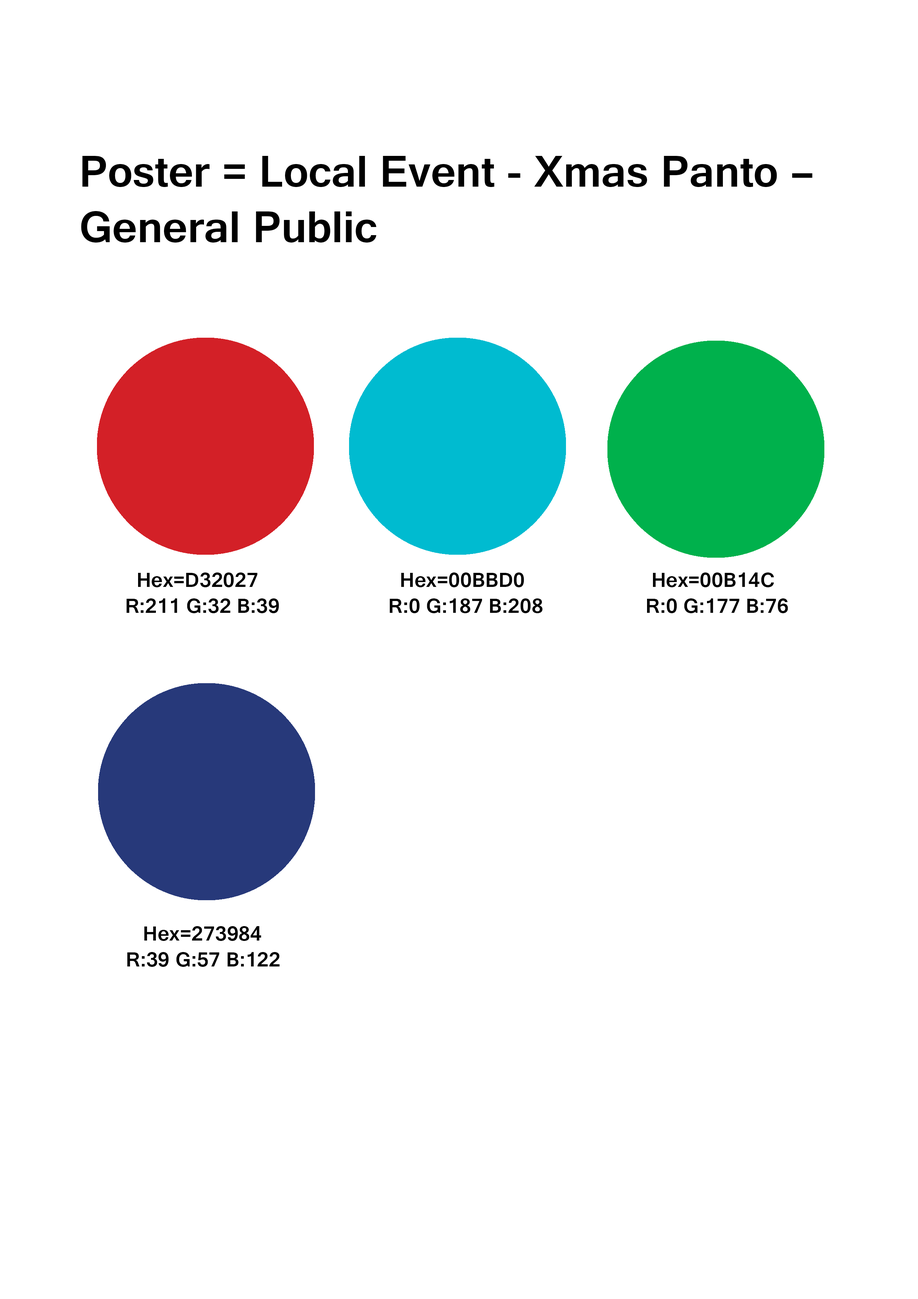
<style>
.page{position:relative;width:918px;height:1299px;background:#ffffff}
.page>*{position:absolute;margin:0}
.t1{font:46.3px "Gautami-Bold";color:#000000}
.t2{font:21.6px "Gautami-Bold";color:#000000}
.t3{font:21.6px "Gautami-Bold";color:#0096db}
</style>
<div class="page">
<p class="t1" style="left:81px;top:156px;width:732px;height:86px">Poster = Local Event - Xmas Panto – General Public</p>
<p class="t2" style="left:127px;top:572px;width:152px;height:41px">Hex=D32027<br>        R:211 G:32 B:39</p>
<p class="t2" style="left:390px;top:572px;width:153px;height:41px">Hex=00BBD0<br>     R:0 G:187 B:208</p>
<p class="t2" style="left:647px;top:572px;width:141px;height:41px">Hex=00B14C<br>   R:0 G:177 B:76</p>
<p class="t2" style="left:127px;top:926px;width:153px;height:41px"><span class="t3"><br>         </span>Hex=273984<br>      R:39 G:57 B:122</p>
</div>
